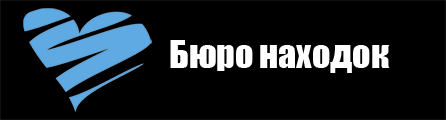
<style>
.page{position:relative;width:446px;height:120px;background:#000000}
.page>*{position:absolute;margin:0}
.t1{font:35.7px "Impact";color:#ffffff}
</style>
<div class="page">
<p class="t1" style="left:170px;top:40px;width:220px;height:33px">Бюро находок</p>
</div>
